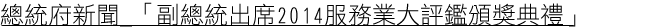
<style>
.page{position:relative;width:650px;height:28px;background:#ffffff}
.page>*{position:absolute;margin:0}
.t1{font:24px "DFHei-Lt-HK-BF";color:#000000}
</style>
<div class="page">
<p class="t1" style="left:0px;top:2px;width:576px;height:25px">總統府新聞_「副總統出席2014服務業大評鑑頒獎典禮」</p>
</div>
